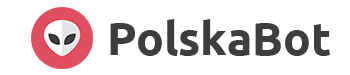
<style>
.page{position:relative;width:350px;height:75px;background:#ffffff}
.page>*{position:absolute;margin:0}
.t1{font:45.8px "Ubuntu-Bold";color:#3e3e3f}
</style>
<div class="page">
<p class="t1" style="left:110px;top:19px;width:220px;height:37px">PolskaBot</p>
</div>
